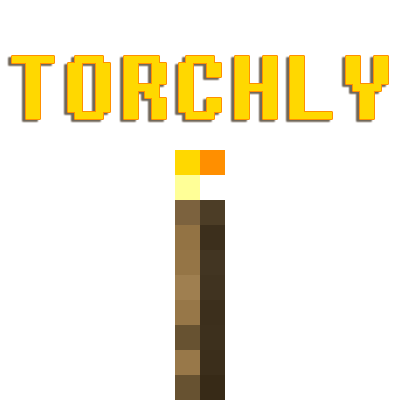
<style>
.page{position:relative;width:400px;height:400px;background:#ffffff}
.page>*{position:absolute;margin:0}
.t1{font:89px "Fixedsys";color:#ffd800}
</style>
<div class="page">
<p class="t1" style="left:12px;top:56px;width:376px;height:63px">TORCHLY</p>
</div>
